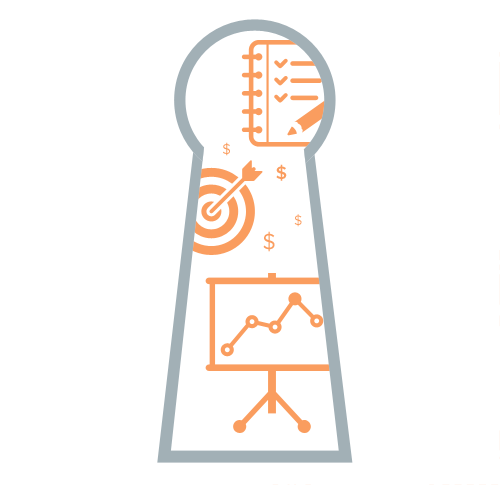
<style>
.page{position:relative;width:500px;height:485px;background:#ffffff}
.page>*{position:absolute;margin:0}
.t1{font:14.6px "ProximaNova-Regular";color:#fa9d5f}
.t2{font:18.4px "ProximaNova-Semibold";color:#fa9d5f}
.t3{font:13.9px "ProximaNova-Regular";color:#fa9d5f}
.t4{font:22.3px "ProximaNova-Regular";color:#fa9d5f}
</style>
<div class="page">
<p class="t1" style="left:223px;top:142px;width:7px;height:14px">$</p>
<p class="t2" style="left:276px;top:164px;width:11px;height:17px">$</p>
<p class="t3" style="left:294px;top:214px;width:8px;height:13px">$</p>
<p class="t4" style="left:263px;top:231px;width:12px;height:21px">$</p>
</div>
